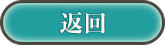
<style>
.page{position:relative;width:165px;height:45px;background:#239e9f}
.page>*{position:absolute;margin:0}
.t1{font:24px "RyuminPr6N-ExBold";color:#fff7f2}
</style>
<div class="page">
<p class="t1" style="left:59px;top:12px;width:46px;height:22px">返回</p>
</div>
